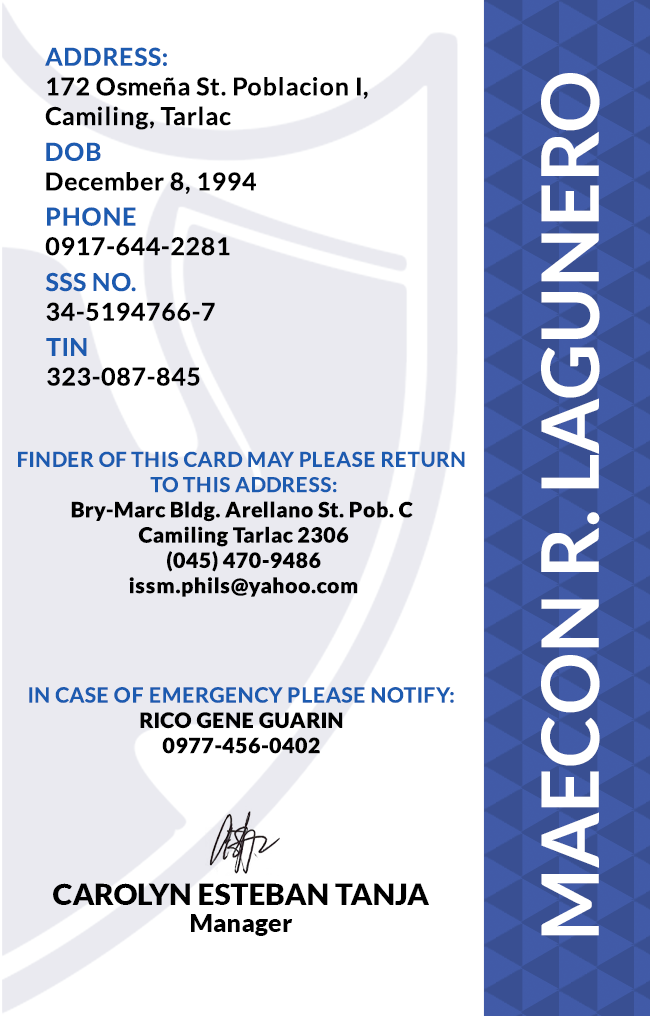
<style>
.page{position:relative;width:650px;height:1016px;background:#ffffff}
.page>*{position:absolute;margin:0}
.t1{font:24.7px/29.6px "Lato-Bold";letter-spacing:0.025em;color:#000000}
.t2{font:24.7px/29.6px "Lato-Bold";letter-spacing:0.025em;color:#1c5bb0}
.t3{font:79.2px "Lato-Bold";color:#ffffff}
.t4{font:21.1px "Lato-Black";letter-spacing:0.025em}
.t5{font:20.5px/25.3px "Lato-Bold";letter-spacing:0.025em;text-transform:uppercase}
.t6{font:21.1px/25.3px "Lato-Bold";letter-spacing:0.025em;color:#1c5bb0}
.t7{font:21.1px "Lato-Black";letter-spacing:0.025em;color:#000000}
.t8{font:29.5px "Lato-Black";color:#000000}
.t9{font:25px "Lato-Black";color:#000000}
</style>
<div class="page">
<p class="t1" style="left:45px;top:47px;width:323px;height:83px"><span class="t2">ADDRESS:<br></span>172 Osmeña St. Poblacion I,<br>Camiling, Tarlac</p>
<p class="t3" style="left:541px;top:73px;width:59px;height:863px;rotate:-90deg">MAECON R. LAGUNERO</p>
<p class="t1" style="left:46px;top:142px;width:210px;height:52px"><span class="t2">DOB<br></span>December 8, 1994</p>
<p class="t1" style="left:45px;top:207px;width:185px;height:49px"><span class="t2">PHONE <br></span>0917-644-2281</p>
<p class="t1" style="left:45px;top:272px;width:170px;height:49px"><span class="t2">SSS NO.<br></span>34-5194766-7</p>
<p class="t1" style="left:46px;top:338px;width:154px;height:48px"><span class="t2">TIN<br></span>323-087-845</p>
<p class="t4" style="left:18px;top:451px;width:447px;height:146px;text-align:center"><span class="t5">Finder of this card may please return <br>to this address:<br></span>Bry-Marc Bldg. Arellano St. Pob. C <br>Camiling Tarlac 2306<br>(045) 470-9486<br>issm.phils@yahoo.com</p>
<p class="t6" style="left:29px;top:687px;width:425px;height:67px;text-align:center">IN CASE OF EMERGENCY PLEASE NOTIFY:<br><span class="t7">RICO GENE GUARIN<br>0977-456-0402</span></p>
<p class="t8" style="left:53px;top:883px;width:376px;height:22px">CAROLYN ESTEBAN TANJA</p>
<p class="t9" style="left:191px;top:914px;width:102px;height:22px">Manager</p>
</div>
